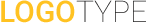
<style>
.page{position:relative;width:147px;height:24px;background:#ffffff}
.page>*{position:absolute;margin:0}
.t1{font:30px "Roboto-Medium";color:#ffc222}
.t2{font:30px "Roboto-Thin";color:#212020}
</style>
<div class="page">
<p class="t1" style="left:1px;top:0px;width:145px;height:23px">LOGO<span class="t2">TYPE</span></p>
</div>
